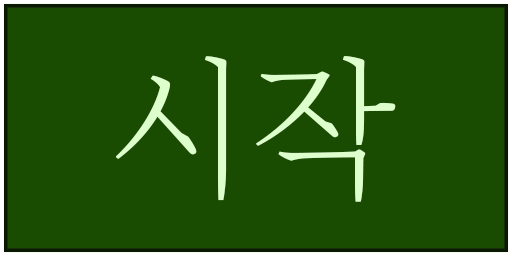
<style>
.page{position:relative;width:512px;height:256px;background:#194c00}
.page>*{position:absolute;margin:0}
.t1{font:150px "NotoSerifKR-ExtraLight";color:#ddffcc}
</style>
<div class="page">
<p class="t1" style="left:115px;top:56px;width:281px;height:146px">시작</p>
</div>
